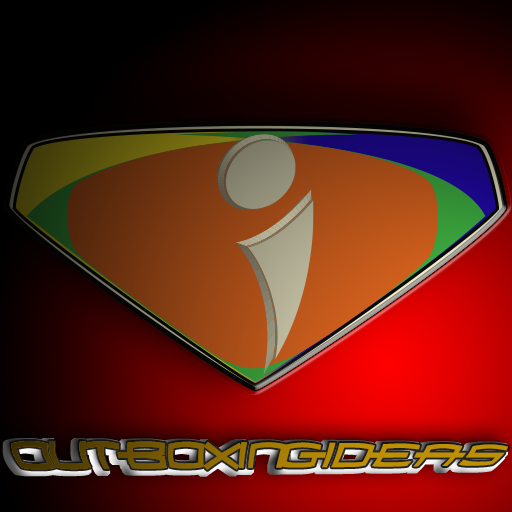
<style>
.page{position:relative;width:512px;height:512px}
.page>*{position:absolute;margin:0}
.t1{font:47.5px "Homoarakhn";letter-spacing:-0.15em}
</style>
<div class="page">
<p class="t1" style="left:11px;top:441px;width:497px;height:29px">OutboxingIdeas</p>
</div>
